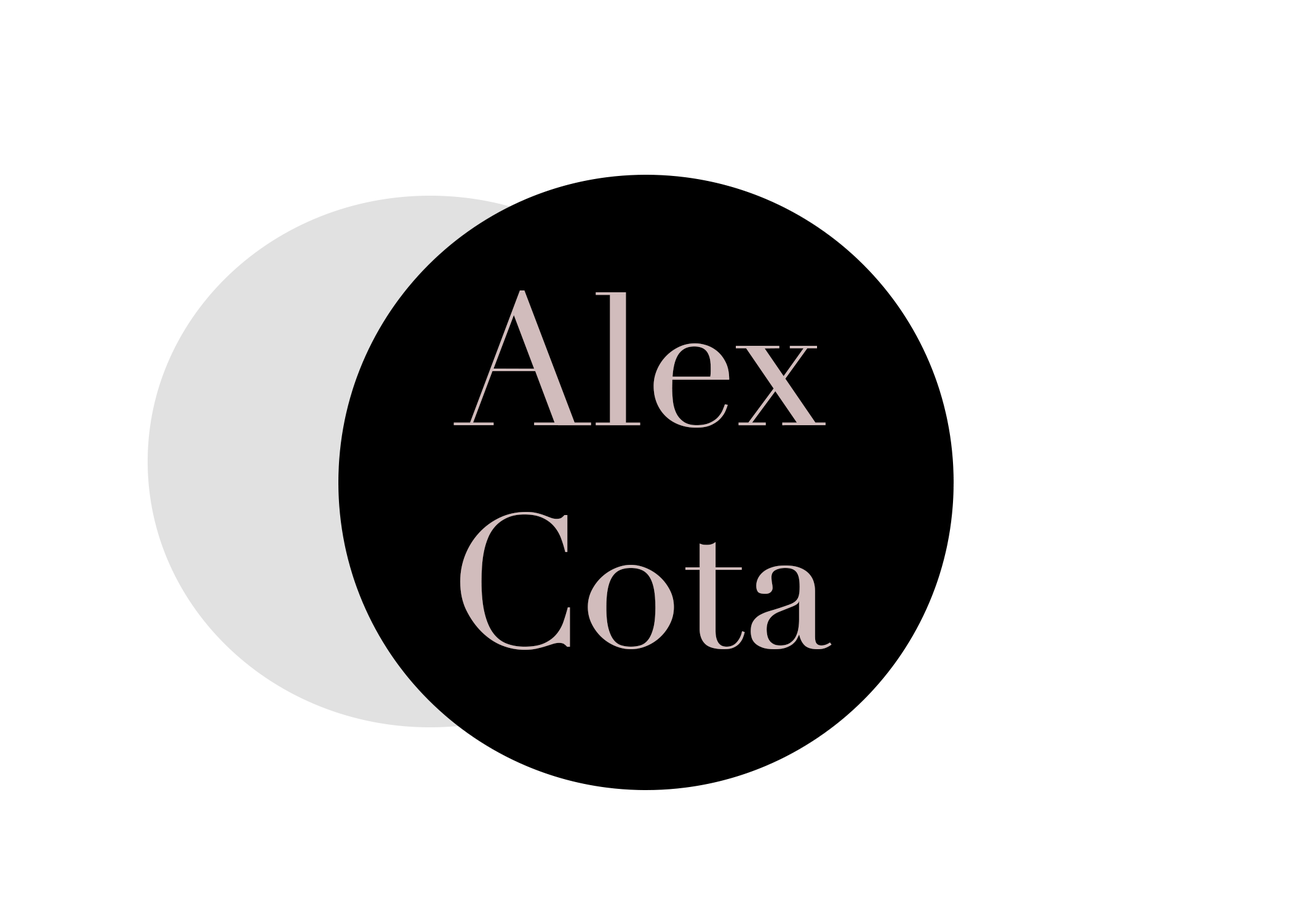
<style>
.page{position:relative;width:1292px;height:923px;background:#ffffff}
.page>*{position:absolute;margin:0}
.t1{font:184.6px "Didot";color:#d1bcbc}
.t2{font:7.4px "MyriadPro-Regular";color:#926666}
</style>
<div class="page">
<p class="t1" style="left:453px;top:290px;width:379px;height:360px;text-align:center"><span class="t2"><br></span>Alex Cota</p>
</div>
